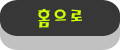
<style>
.page{position:relative;width:120px;height:50px;background:#373737}
.page>*{position:absolute;margin:0}
.t1{font:20px "MagicR-HM";color:#ccff00;scale:1.2 1}
</style>
<div class="page">
<p class="t1" style="left:38px;top:9px;width:44px;height:19px">홈으로</p>
</div>
